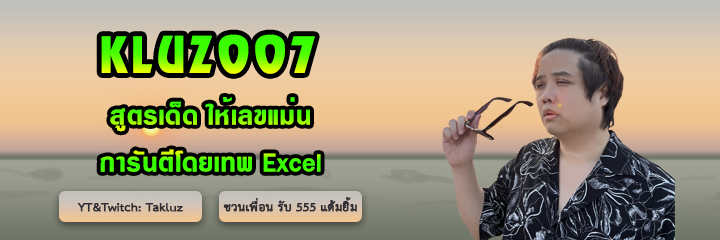
<style>
.page{position:relative;width:720px;height:240px}
.page>*{position:absolute;margin:0}
.t1{font:77.4px "DSNJumPar";font-weight:bold}
.t2{font:36px "DSNLardPhrao";font-weight:bold}
.t3{font:36px "DSNLardPhrao";color:#40ff00;font-weight:bold}
</style>
<div class="page">
<p class="t1" style="left:101px;top:34px;width:214px;height:40px">KLUZ007</p>
<p class="t2" style="left:110px;top:97px;width:200px;height:35px">สูตรเด็ด ให้เลขแม่น</p>
<p class="t3" style="left:100px;top:149px;width:221px;height:23px">การันตีโดยเทพ Excel</p>
</div>
